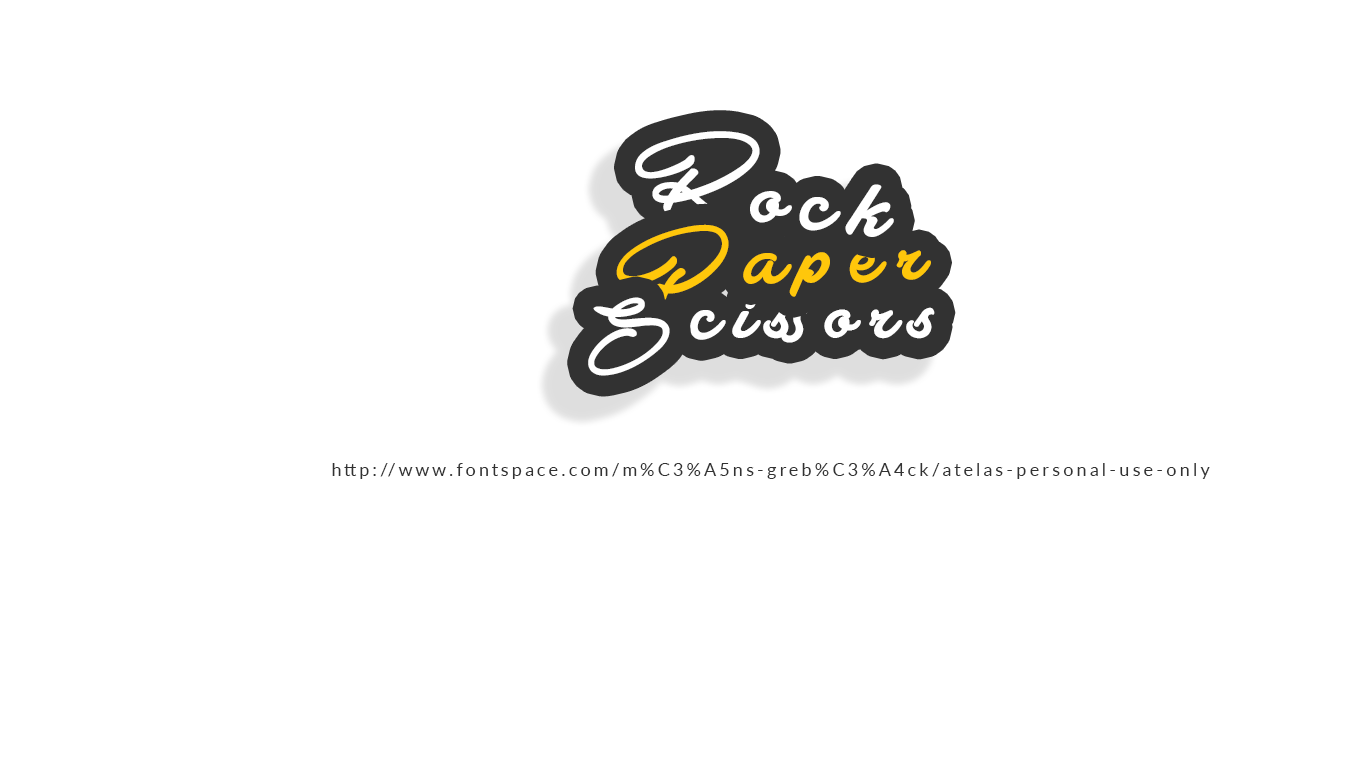
<style>
.page{position:relative;width:1366px;height:768px;background:#ffffff}
.page>*{position:absolute;margin:0}
.t1{font:99px "AtelasPersonalUseOnly";letter-spacing:0.18em;color:#ffffff}
.t2{font:90.1px "AtelasPersonalUseOnly";letter-spacing:0.18em;color:#ffc70b}
.t3{font:86.7px "AtelasPersonalUseOnly";letter-spacing:0.18em;color:#ffffff}
.t4{font:17.8px "Lato-Regular";letter-spacing:0.18em;color:#323232}
</style>
<div class="page">
<p class="t1" style="left:635px;top:131px;width:125px;height:95px;rotate:7deg">R</p>
<p class="t1" style="left:750px;top:184px;width:144px;height:53px;rotate:7deg">ock</p>
<p class="t2" style="left:616px;top:224px;width:315px;height:83px;rotate:-2deg">Paper</p>
<p class="t3" style="left:588px;top:297px;width:82px;height:79px">S</p>
<p class="t3" style="left:690px;top:299px;width:245px;height:44px">cissors</p>
<p class="t4" style="left:332px;top:463px;width:878px;height:16px">http://www.fontspace.com/m%C3%A5ns-greb%C3%A4ck/atelas-personal-use-only</p>
</div>
